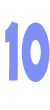
<style>
.page{position:relative;width:50px;height:110px;background:#ffffff}
.page>*{position:absolute;margin:0}
.t1{font:96px "BerlinSansFBDemi-Bold";color:#7f90f4;scale:0.5 1}
</style>
<div class="page">
<p class="t1" style="left:5px;top:21px;width:45px;height:61px">10</p>
</div>
